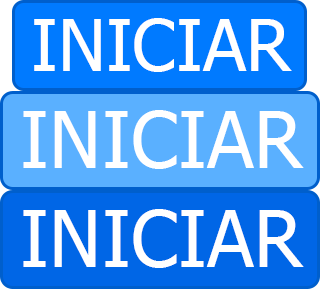
<style>
.page{position:relative;width:320px;height:289px;background:#5ab0ff}
.page>*{position:absolute;margin:0}
.t1{font:72px "Tahoma";color:#ffffff}
.t2{font:78.3px "Tahoma";color:#ffffff}
</style>
<div class="page">
<p class="t1" style="left:34px;top:18px;width:258px;height:54px">INICIAR</p>
<p class="t2" style="left:23px;top:110px;width:281px;height:59px">INICIAR</p>
<p class="t2" style="left:23px;top:209px;width:281px;height:59px">INICIAR</p>
</div>
